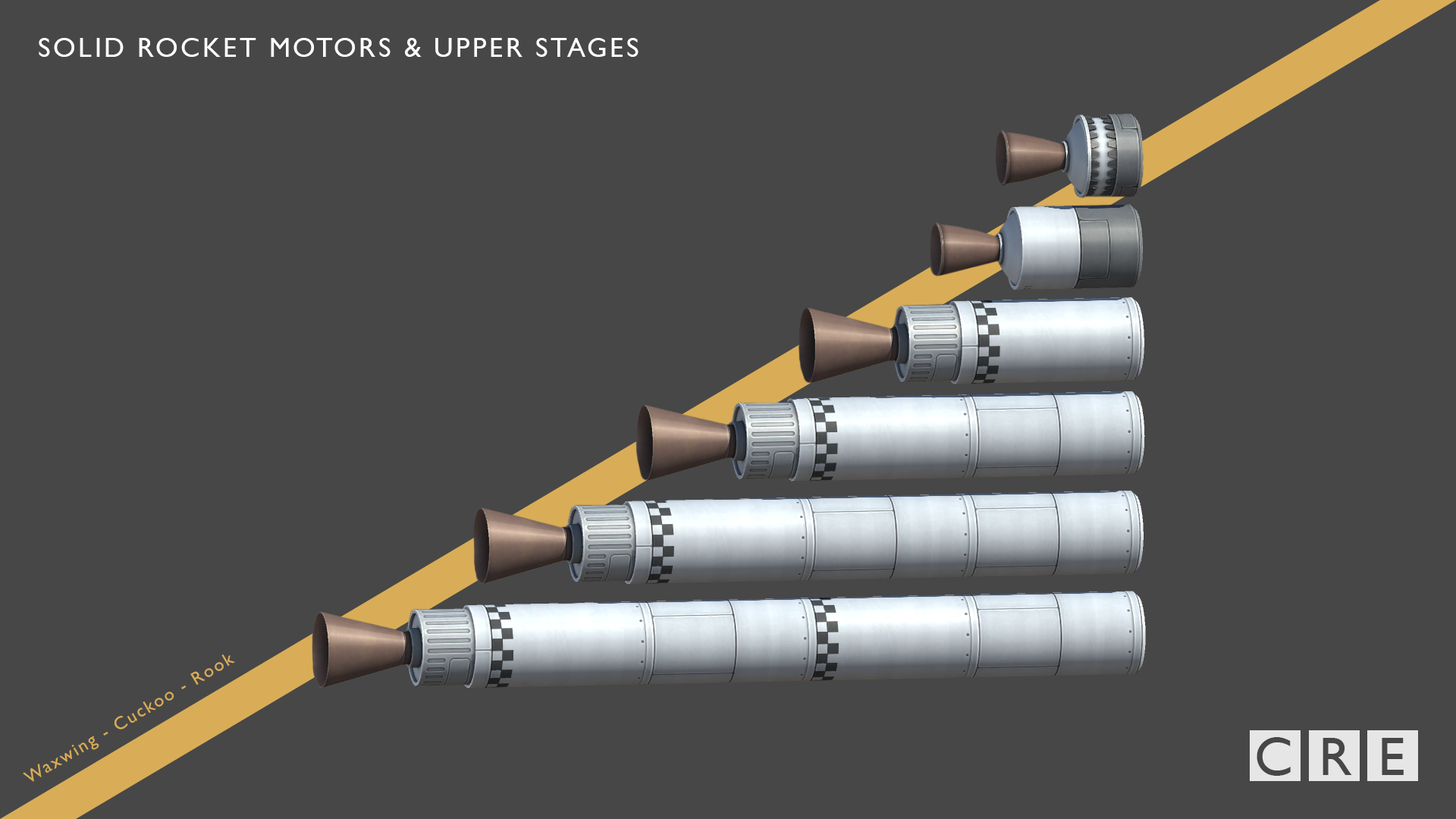
<style>
.page{position:relative;width:1456px;height:819px;background:#474747}
.page>*{position:absolute;margin:0}
.t1{font:27.3px "GillSansMT";letter-spacing:0.1em;color:#ffffff}
.t2{font:54.6px "GillSansMT";letter-spacing:0.1em;color:#474747}
</style>
<div class="page">
<p class="t1" style="left:39px;top:38px;width:600px;height:19px">SOLID ROCKET MOTORS &amp; UPPER STAGES</p>
<p class="t2" style="left:1257px;top:737px;width:147px;height:39px">C R E</p>
</div>
